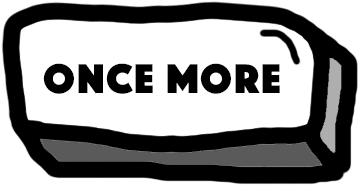
<style>
.page{position:relative;width:360px;height:185px;background:#ffffff}
.page>*{position:absolute;margin:0}
.t1{font:43px "Phosphate-Solid";letter-spacing:0.04em;color:#000000}
</style>
<div class="page">
<p class="t1" style="left:43px;top:63px;width:237px;height:31px">Once more</p>
</div>
